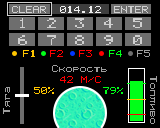
<style>
.page{position:relative;width:160px;height:128px;background:#000000}
.page>*{position:absolute;margin:0}
.t1{font:6.6px "Casio-fx-9860GII";color:#cfcfcf;scale:1.27 1}
.t2{font:6.6px "Casio-fx-9860GII";color:#efefef;scale:1.27 1}
.t3{font:9.9px "Casio-fx-9860GII";color:#cfcfcf;scale:1.27 1}
.t4{font:6.6px "Casio-fx-9860GII";color:#ffc600;scale:1.27 1}
.t5{font:6.6px "Casio-fx-9860GII";color:#ff0000;scale:1.27 1}
.t6{font:6.6px "Casio-fx-9860GII";color:#00ff18;scale:1.27 1}
.t7{font:6.6px "Casio-fx-9860GII";color:#9e9e9e;scale:1.27 1}
</style>
<div class="page">
<p class="t1" style="left:12px;top:6px;width:34px;height:7px">CLEAR</p>
<p class="t2" style="left:60px;top:6px;width:41px;height:7px">014.12</p>
<p class="t1" style="left:114px;top:6px;width:34px;height:7px">ENTER</p>
<p class="t3" style="left:20px;top:18px;width:5px;height:10px">1</p>
<p class="t3" style="left:47px;top:18px;width:9px;height:10px">2</p>
<p class="t3" style="left:75px;top:18px;width:9px;height:10px">3</p>
<p class="t3" style="left:104px;top:18px;width:9px;height:10px">4</p>
<p class="t3" style="left:133px;top:18px;width:9px;height:10px">5</p>
<p class="t3" style="left:18px;top:35px;width:9px;height:10px">6</p>
<p class="t3" style="left:47px;top:35px;width:9px;height:10px">7</p>
<p class="t3" style="left:75px;top:35px;width:9px;height:10px">8</p>
<p class="t3" style="left:104px;top:35px;width:9px;height:10px">9</p>
<p class="t3" style="left:133px;top:35px;width:9px;height:10px">0</p>
<p class="t4" style="left:23px;top:50px;width:12px;height:7px">F1</p>
<p class="t5" style="left:50px;top:50px;width:13px;height:7px">F2</p>
<p class="t5" style="left:79px;top:50px;width:13px;height:7px">F3</p>
<p class="t6" style="left:109px;top:50px;width:13px;height:7px">F4</p>
<p class="t7" style="left:137px;top:50px;width:13px;height:7px">F5</p>
<p class="t7" style="left:52px;top:65px;width:55px;height:7px">Скорость</p>
<p class="t5" style="left:60px;top:76px;width:41px;height:7px">42 М/С</p>
<p class="t7" style="left:150px;top:76px;width:7px;height:48px;rotate:90deg">Топливо</p>
<p class="t7" style="left:3px;top:87px;width:7px;height:27px;rotate:-90deg">Тяга</p>
<p class="t4" style="left:34px;top:87px;width:20px;height:7px">50%</p>
<p class="t6" style="left:103px;top:87px;width:20px;height:7px">79%</p>
</div>
